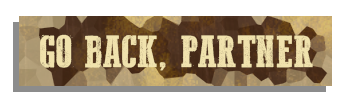
<style>
.page{position:relative;width:346px;height:108px;background:#ffffff}
.page>*{position:absolute;margin:0}
.t1{font:46.7px "WesternBangBang";color:#f0e2ad}
</style>
<div class="page">
<p class="t1" style="left:39px;top:34px;width:274px;height:37px">GO BACK, PARTNER</p>
</div>
